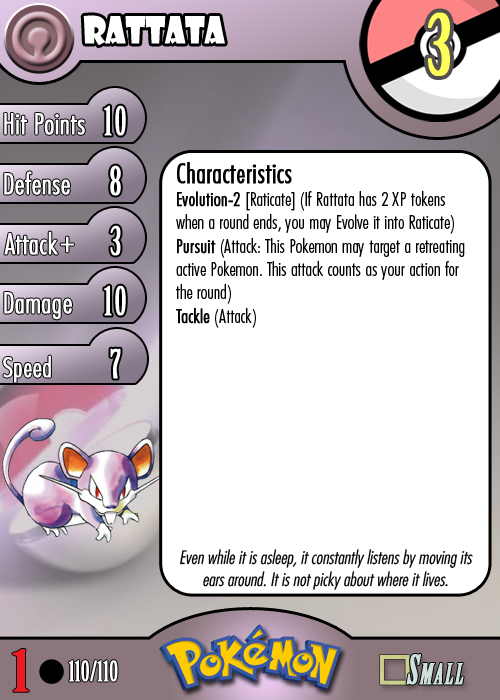
<style>
.page{position:relative;width:500px;height:700px;background:#ffffff}
.page>*{position:absolute;margin:0}
.t1{font:36.7px "ShowcardGothic-Reg";letter-spacing:-0.025em;color:#ffffff;scale:0.91 1}
.t2{font:83.3px "BirchStd";letter-spacing:0.025em;color:#fffd59;font-weight:bold}
.t3{font:27.8px "Futura-CondensedLight";color:#ffffff;font-weight:bold}
.t4{font:38.9px "BirchStd";letter-spacing:0.035em;color:#ffffff;font-weight:bold}
.t5{font:19.4px "FuturaCondensedBQ-Light";color:#010101}
.t6{font:27.8px "FuturaCondensedBQ-Light";color:#010101;font-weight:bold}
.t7{font:19.4px "FuturaCondensedBQ-Light";color:#010101;font-weight:bold}
.t8{font:30.6px "Futura-CondensedLight";color:#ffffff;font-weight:bold}
.t9{font:27.8px "FuturaCondensedBQ-Light";color:#ffffff;font-weight:bold}
.t10{font:18.1px "Futura-CondensedLight";color:#010101;font-style:italic}
.t11{font:55.6px "BirchStd";color:#ed1c24;font-weight:bold;scale:1.5 1}
.t12{font:27.8px "BirchStd";color:#ffffff;font-weight:bold}
</style>
<div class="page">
<p class="t1" style="left:83px;top:15px;width:142px;height:31px">rattata</p>
<p class="t2" style="left:428px;top:12px;width:22px;height:64px">3</p>
<p class="t3" style="left:4px;top:113px;width:81px;height:22px">Hit Points</p>
<p class="t4" style="left:104px;top:105px;width:22px;height:31px">10</p>
<p class="t3" style="left:4px;top:171px;width:66px;height:24px">Defense</p>
<p class="t4" style="left:110px;top:165px;width:11px;height:31px">8</p>
<p class="t5" style="left:176px;top:162px;width:289px;height:166px"><span class="t6">Characteristics<br></span><span class="t7">Evolution-2 </span>[Raticate] (If Rattata has 2 XP tokens when a round ends, you may Evolve it into Raticate)<br><span class="t7">Pursuit</span> (Attack: This Pokemon may target a retreating active Pokemon. This attack counts as your action for the round)<br><span class="t7">Tackle</span> (Attack)</p>
<p class="t3" style="left:4px;top:231px;width:54px;height:24px">Attack</p>
<p class="t4" style="left:110px;top:225px;width:11px;height:31px">3</p>
<p class="t8" style="left:60px;top:236px;width:14px;height:17px">+</p>
<p class="t3" style="left:4px;top:292px;width:68px;height:28px">Damage</p>
<p class="t4" style="left:104px;top:285px;width:22px;height:31px">10</p>
<p class="t4" style="left:110px;top:348px;width:11px;height:31px">7</p>
<p class="t9" style="left:3px;top:355px;width:48px;height:28px">Speed</p>
<p class="t10" style="left:180px;top:549px;width:293px;height:41px;text-align:center">Even while it is asleep, it constantly listens by moving its ears around. It is not picky about where it lives.</p>
<p class="t11" style="left:12px;top:649px;width:17px;height:43px">1</p>
<p class="t12" style="left:68px;top:660px;width:50px;height:22px">110/110</p>
</div>
